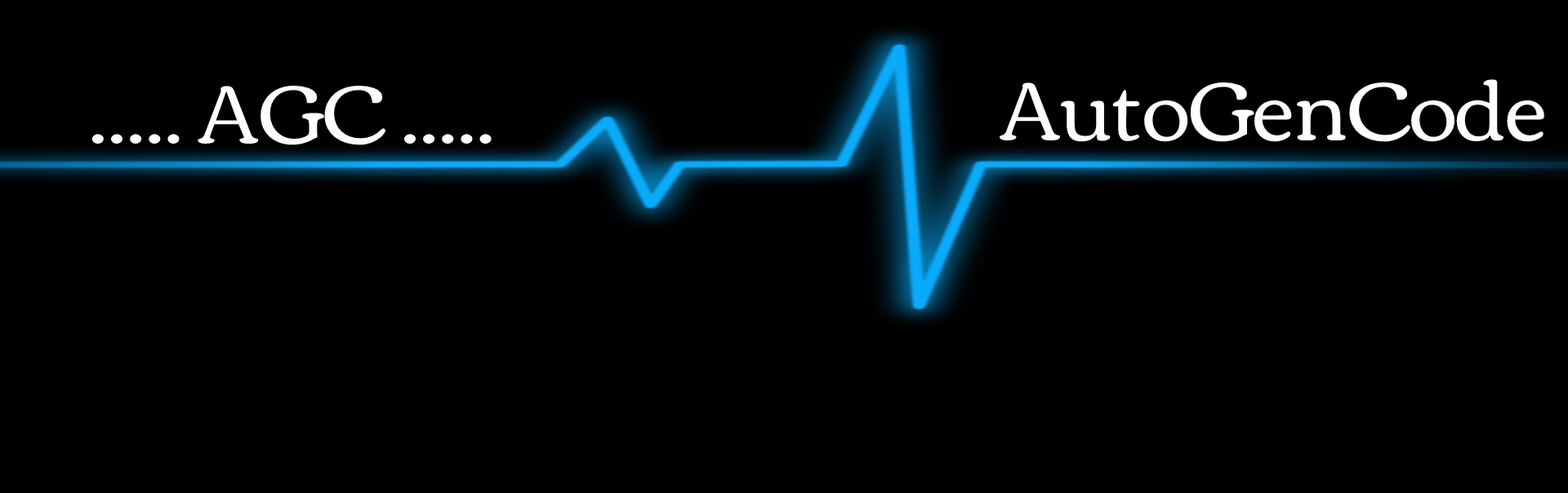
<style>
.page{position:relative;width:1568px;height:493px;background:#000000}
.page>*{position:absolute;margin:0}
.t1{font:84.1px "Corben-Regular";color:#fefefe}
</style>
<div class="page">
<p class="t1" style="left:91px;top:85px;width:401px;height:60px">..... AGC .....</p>
<p class="t1" style="left:999px;top:79px;width:545px;height:63px">AutoGenCode</p>
</div>
